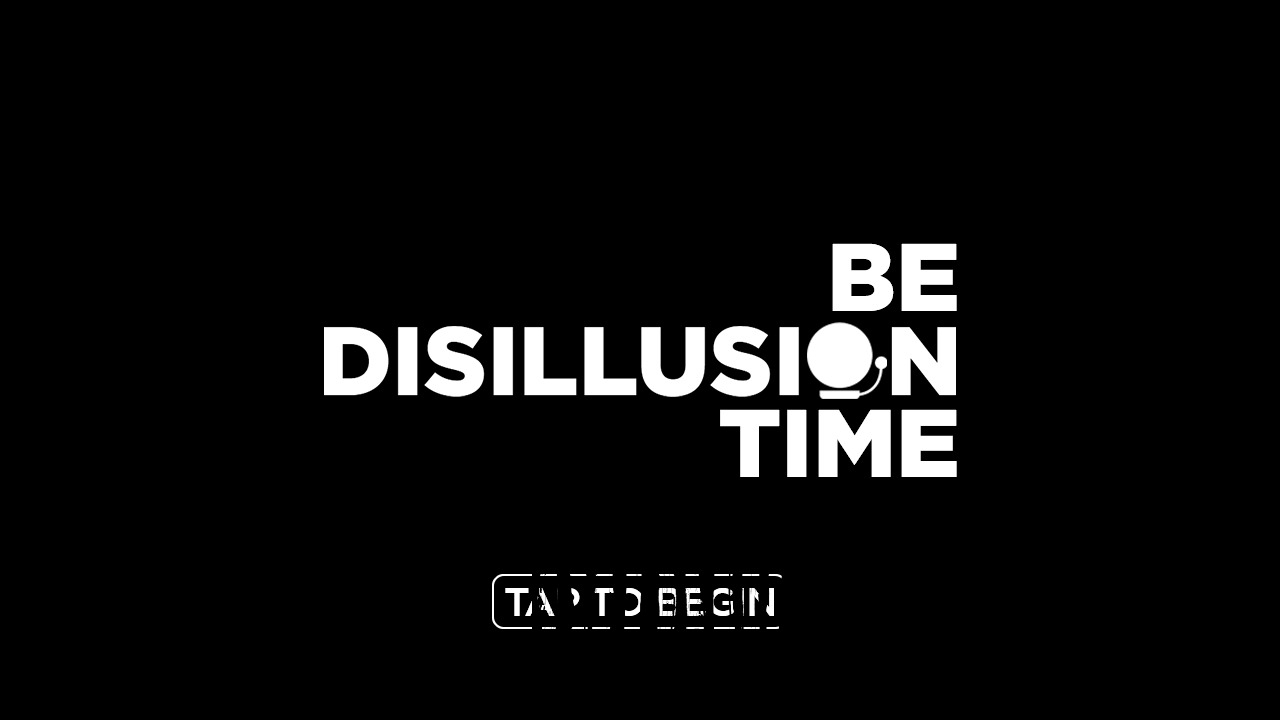
<style>
.page{position:relative;width:1280px;height:720px;background:#000000}
.page>*{position:absolute;margin:0}
.t1{font:96px "Gotham-Black";color:#ffffff}
.t2{font:40px "Gotham-Medium";letter-spacing:-0.05em}
</style>
<div class="page">
<p class="t1" style="left:832px;top:243px;width:125px;height:68px">BE</p>
<p class="t1" style="left:720px;top:409px;width:237px;height:68px">TIME</p>
<p class="t2" style="left:505px;top:588px;width:269px;height:28px">TAP TO BEGIN</p>
</div>
